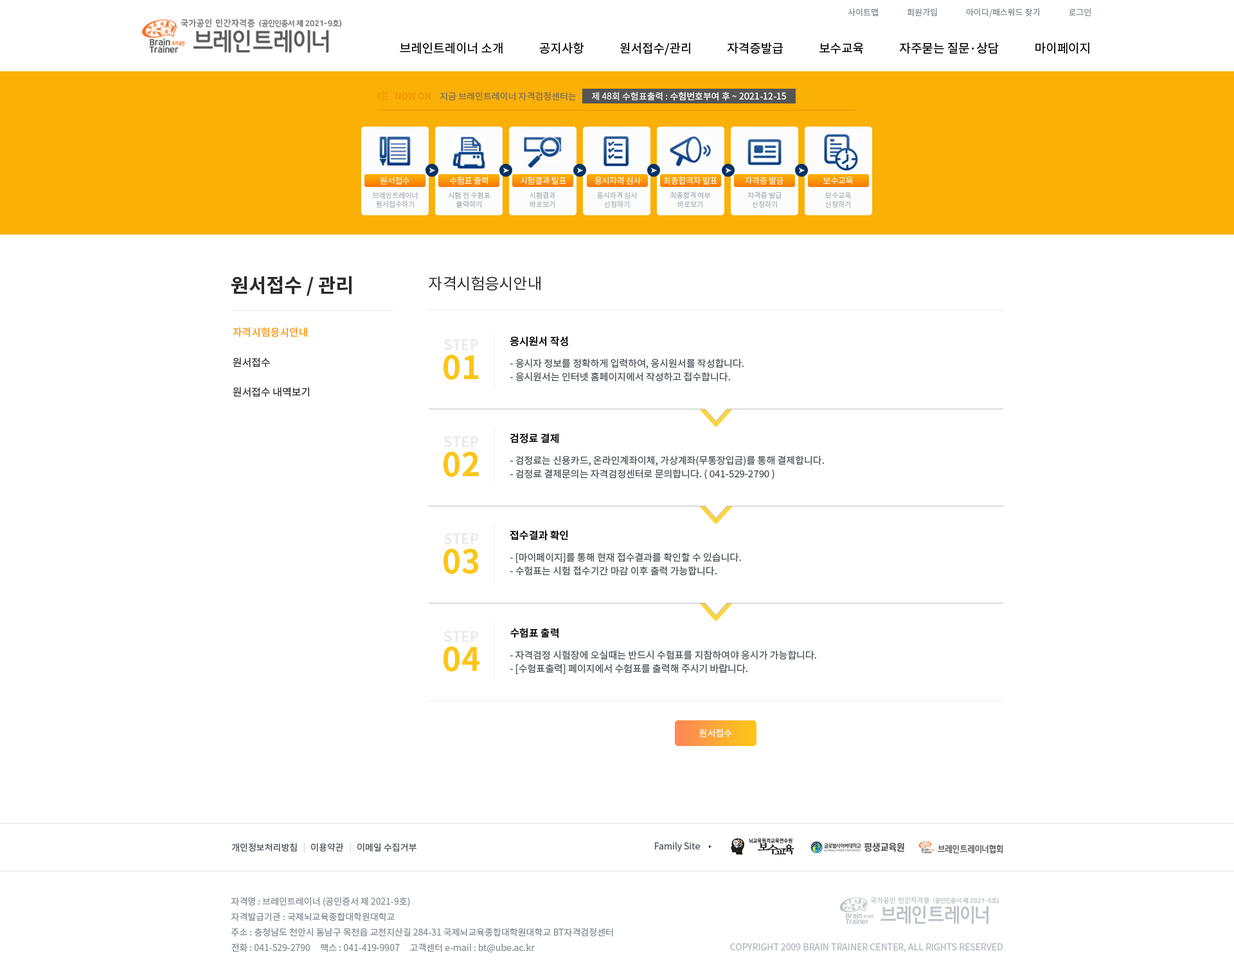
<style>
.page{position:relative;width:1234px;height:978px;background:#ffffff}
.page>*{position:absolute;margin:0}
.t1{font:8.4px "NotoSansCJKkr-Regular";letter-spacing:0.001em;color:#868e96}
.t2{font:12.2px "NotoSansCJKkr-Regular";color:#000000}
.t3{font:9px "NotoSansCJKkr-Regular";color:#f08c00}
.t4{font:9px "NotoSansCJKkr-Regular";color:#7c6d5d}
.t5{font:9px "NotoSansCJKkr-Medium";color:#f8f8f8}
.t6{font:9px "NotoSansCJKkr-Regular";color:#f8f8f8}
.t7{font:8.4px "NotoSansCJKkr-Light";letter-spacing:-0.025em;color:#fcfcfc}
.t8{font:7.1px/9px "NotoSansCJKkr-Regular";color:#adb5bd}
.t9{font:19.3px "NotoSansCJKkr-Bold";color:#2b2b2b}
.t10{font:15.4px "NotoSansCJKkr-Regular";color:#2b2b2b}
.t11{font:10.3px "NotoSansCJKkr-Medium";color:#fd9f27}
.t12{font:14.1px "NotoSansCJKkr-Bold";color:#eaeaea}
.t13{font:10.3px "NotoSansCJKkr-Medium";color:#000000}
.t14{font:10.3px "NotoSansCJKkr-Regular";color:#2b2b2b}
.t15{font:32.1px "NotoSansCJKkr-Bold";color:#fcc519}
.t16{font:9.6px/13.5px "NotoSansCJKkr-Regular";color:#495057}
.t17{font:9px "NotoSansCJKkr-Regular";color:#ffffff}
.t18{font:9px "NotoSansCJKkr-Regular";color:#495057}
.t19{font:9px "NotoSansCJKkr-Regular";color:#ced4da}
.t20{font:9px/15.4px "NotoSansCJKkr-Regular";color:#868e96}
.t21{font:9px "NotoSansCJKkr-Regular";color:#adb5bd}
</style>
<div class="page">
<p class="t1" style="left:848px;top:8px;width:244px;height:9px">사이트맵               회원가입               아이디/패스워드 찾기               로그인</p>
<p class="t2" style="left:400px;top:42px;width:690px;height:13px">브레인트레이너 소개             공지사항             원서접수/관리             자격증발급             보수교육             자주묻는 질문·상담             마이페이지</p>
<p class="t3" style="left:395px;top:93px;width:36px;height:7px">NOW ON</p>
<p class="t4" style="left:440px;top:92px;width:137px;height:9px">지금 브레인트레이너 자격검정센터는</p>
<p class="t5" style="left:592px;top:92px;width:194px;height:9px"><span class="t6">제 48회 수험표출력 : </span>수험번호부여 후 ~ 2021-12-15</p>
<p class="t7" style="left:380px;top:177px;width:30px;height:8px">원서접수</p>
<p class="t7" style="left:450px;top:176px;width:38px;height:9px">수험표 출력</p>
<p class="t7" style="left:520px;top:176px;width:46px;height:8px">시험결과 발표</p>
<p class="t7" style="left:595px;top:176px;width:47px;height:9px">응시자격 심사</p>
<p class="t7" style="left:663px;top:176px;width:54px;height:9px">최종합격자 발표</p>
<p class="t7" style="left:745px;top:176px;width:39px;height:9px">자격증 발급</p>
<p class="t7" style="left:823px;top:177px;width:30px;height:8px">보수교육</p>
<p class="t8" style="left:373px;top:192px;width:45px;height:16px;text-align:center">브레인트레이너<br>원서접수하기</p>
<p class="t8" style="left:448px;top:192px;width:43px;height:16px;text-align:center">시험 전 수험표<br>출력하기</p>
<p class="t8" style="left:530px;top:192px;width:25px;height:16px;text-align:center">시험결과<br>바로보기</p>
<p class="t8" style="left:597px;top:192px;width:41px;height:16px;text-align:center">응시자격 심사<br>신청하기</p>
<p class="t8" style="left:670px;top:192px;width:41px;height:16px;text-align:center">최종합격 여부<br>바로보기</p>
<p class="t8" style="left:748px;top:192px;width:34px;height:16px;text-align:center">자격증 발급<br>신청하기</p>
<p class="t8" style="left:825px;top:192px;width:27px;height:16px;text-align:center">보수교육<br>신청하기</p>
<p class="t9" style="left:231px;top:276px;width:121px;height:20px">원서접수 / 관리</p>
<p class="t10" style="left:429px;top:276px;width:112px;height:15px">자격시험응시안내</p>
<p class="t11" style="left:233px;top:327px;width:74px;height:11px">자격시험응시안내</p>
<p class="t12" style="left:444px;top:339px;width:34px;height:11px">STEP</p>
<p class="t13" style="left:510px;top:336px;width:58px;height:10px">응시원서 작성</p>
<p class="t14" style="left:233px;top:357px;width:37px;height:11px">원서접수</p>
<p class="t15" style="left:444px;top:355px;width:35px;height:25px">01</p>
<p class="t16" style="left:510px;top:359px;width:234px;height:23px">- 응시자 정보를 정확하게 입력하여, 응시원서를 작성합니다.<br>- 응시원서는 인터넷 홈페이지에서 작성하고 접수합니다.</p>
<p class="t14" style="left:233px;top:387px;width:76px;height:10px">원서접수 내역보기</p>
<p class="t12" style="left:444px;top:437px;width:34px;height:10px">STEP</p>
<p class="t13" style="left:510px;top:433px;width:49px;height:11px">검정료 결제</p>
<p class="t15" style="left:444px;top:452px;width:35px;height:25px">02</p>
<p class="t16" style="left:510px;top:456px;width:314px;height:24px">- 검정료는 신용카드, 온라인계좌이체, 가상계좌(무통장입금)를 통해 결제합니다.<br>- 검정료 결제문의는 자격검정센터로 문의합니다. ( 041-529-2790 )</p>
<p class="t12" style="left:444px;top:534px;width:34px;height:10px">STEP</p>
<p class="t13" style="left:510px;top:530px;width:58px;height:11px">접수결과 확인</p>
<p class="t15" style="left:444px;top:549px;width:35px;height:25px">03</p>
<p class="t16" style="left:510px;top:553px;width:231px;height:23px">- [마이페이지]를 통해 현재 접수결과를 확인할 수 있습니다.<br>- 수험표는 시험 접수기간 마감 이후 출력 가능합니다.</p>
<p class="t13" style="left:510px;top:628px;width:49px;height:10px">수험표 출력</p>
<p class="t12" style="left:444px;top:631px;width:34px;height:11px">STEP</p>
<p class="t15" style="left:444px;top:647px;width:36px;height:25px">04</p>
<p class="t16" style="left:510px;top:651px;width:306px;height:23px">- 자격검정 시험장에 오실때는 반드시 수험표를 지참하여야 응시가 가능합니다.<br>- [수험표출력] 페이지에서 수험표를 출력해 주시기 바랍니다.</p>
<p class="t17" style="left:699px;top:729px;width:33px;height:9px">원서접수</p>
<p class="t18" style="left:231px;top:843px;width:66px;height:9px">개인정보처리방침</p>
<p class="t19" style="left:303px;top:843px;width:2px;height:10px">|</p>
<p class="t18" style="left:311px;top:843px;width:33px;height:9px">이용약관</p>
<p class="t19" style="left:350px;top:843px;width:1px;height:10px">|</p>
<p class="t18" style="left:357px;top:843px;width:60px;height:9px">이메일 수집거부</p>
<p class="t18" style="left:655px;top:842px;width:45px;height:10px">Family Site</p>
<p class="t20" style="left:231px;top:897px;width:382px;height:56px">자격명 : 브레인트레이너 (공인증서 제 2021-9호)<br>자격발급기관 : 국제뇌교육종합대학원대학교<br>주소 : 충청남도 천안시 동남구 목천읍 교천지산길 284-31 국제뇌교육종합대학원대학교 BT자격검정센터<br>전화 : 041-529-2790     팩스 : 041-419-9907     고객센터 e-mail : bt@ube.ac.kr</p>
<p class="t21" style="left:730px;top:944px;width:273px;height:9px">COPYRIGHT 2009 BRAIN TRAINER CENTER, ALL RIGHTS RESERVED</p>
</div>
